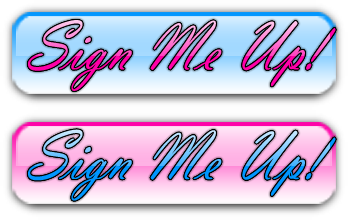
<style>
.page{position:relative;width:348px;height:220px}
.page>*{position:absolute;margin:0}
.t1{font:72px "VladimirScript";letter-spacing:0.01em;scale:0.84 1}
</style>
<div class="page">
<p class="t1" style="left:28px;top:20px;width:308px;height:71px">Sign Me Up!</p>
<p class="t1" style="left:28px;top:129px;width:308px;height:72px">Sign Me Up!</p>
</div>
